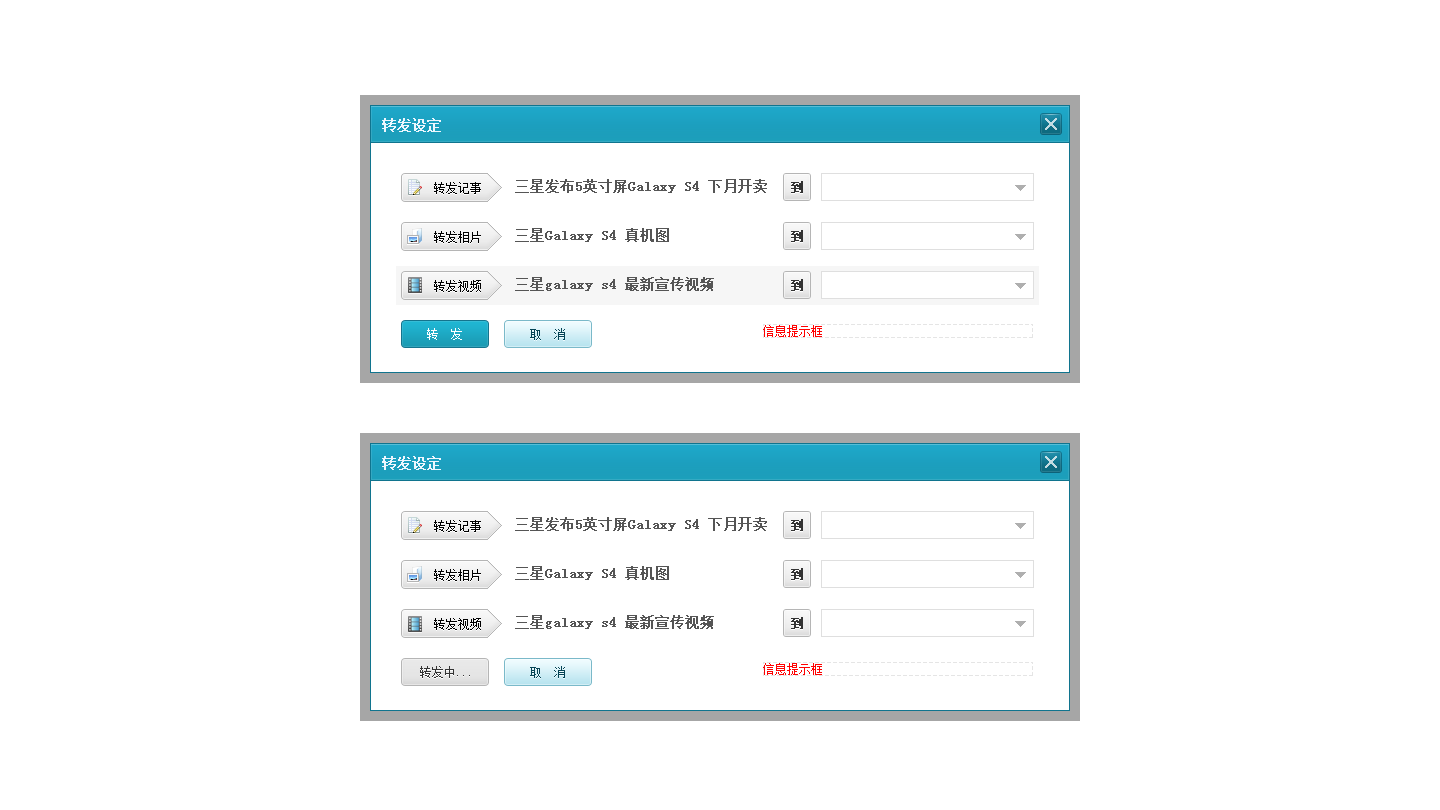
<style>
.page{position:relative;width:1440px;height:810px;background:#ffffff}
.page>*{position:absolute;margin:0}
.t1{font:14px "SimSun";color:#eef7fe;font-weight:bold}
.t2{font:12px "SimSun";color:#000000}
.t3{font:14px "SimSun";color:#555555;font-weight:bold}
.t4{font:12px "SimSun";color:#333333;font-weight:bold}
.t5{font:12px "SimSun";color:#ffffff}
.t6{font:12px "SimSun";color:#044455}
.t7{font:12px "SimSun";color:#333333}
</style>
<div class="page">
<p class="t1" style="left:382px;top:118px;width:59px;height:14px">转发设定</p>
<p class="t2" style="left:434px;top:182px;width:47px;height:12px">转发记事</p>
<p class="t3" style="left:515px;top:179px;width:252px;height:14px">三星发布5英寸屏Galaxy S4 下月开卖</p>
<p class="t4" style="left:791px;top:181px;width:12px;height:12px">到</p>
<p class="t2" style="left:434px;top:231px;width:47px;height:12px">转发相片</p>
<p class="t3" style="left:515px;top:228px;width:154px;height:14px">三星Galaxy S4 真机图</p>
<p class="t4" style="left:791px;top:230px;width:12px;height:12px">到</p>
<p class="t2" style="left:434px;top:280px;width:47px;height:12px">转发视频</p>
<p class="t3" style="left:515px;top:277px;width:199px;height:14px">三星galaxy s4 最新宣传视频</p>
<p class="t4" style="left:791px;top:279px;width:12px;height:12px">到</p>
<p class="t5" style="left:427px;top:328px;width:35px;height:12px">转  发</p>
<p class="t6" style="left:530px;top:328px;width:35px;height:12px">取  消</p>
<p class="t1" style="left:382px;top:456px;width:59px;height:14px">转发设定</p>
<p class="t2" style="left:434px;top:520px;width:47px;height:12px">转发记事</p>
<p class="t3" style="left:515px;top:517px;width:252px;height:14px">三星发布5英寸屏Galaxy S4 下月开卖</p>
<p class="t4" style="left:791px;top:519px;width:12px;height:12px">到</p>
<p class="t2" style="left:434px;top:569px;width:47px;height:12px">转发相片</p>
<p class="t3" style="left:515px;top:566px;width:154px;height:14px">三星Galaxy S4 真机图</p>
<p class="t4" style="left:791px;top:568px;width:12px;height:12px">到</p>
<p class="t3" style="left:515px;top:615px;width:199px;height:14px">三星galaxy s4 最新宣传视频</p>
<p class="t4" style="left:791px;top:617px;width:12px;height:12px">到</p>
<p class="t2" style="left:434px;top:618px;width:47px;height:12px">转发视频</p>
<p class="t7" style="left:420px;top:666px;width:50px;height:12px">转发中...</p>
<p class="t6" style="left:530px;top:666px;width:35px;height:12px">取  消</p>
</div>
